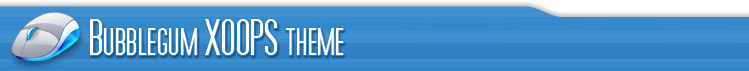
<style>
.page{position:relative;width:749px;height:71px}
.page>*{position:absolute;margin:0}
.t1{font:60px "MoviePoster";color:#fefefe}
</style>
<div class="page">
<p class="t1" style="left:90px;top:19px;width:254px;height:36px">Bubblegum XOOPS theme</p>
</div>
